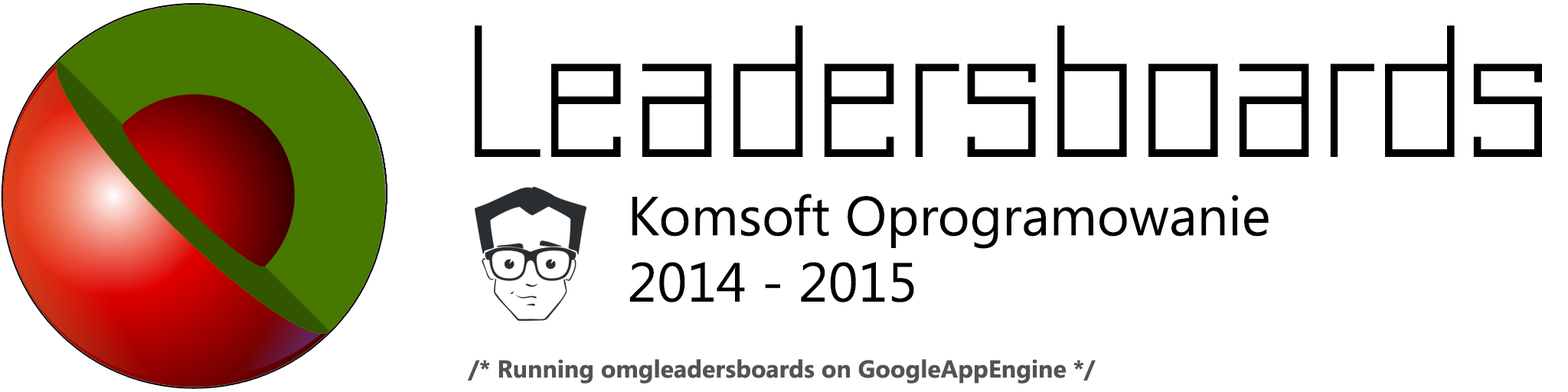
<style>
.page{position:relative;width:1568px;height:392px;background:#ffffff}
.page>*{position:absolute;margin:0}
.t1{font:192.9px "JustSquareLTStd-CyrThin";color:#000000}
.t2{font:55.1px "SegoeUI";color:#000000}
.t3{font:24.5px "SegoeUI-Bold";color:#545353}
</style>
<div class="page">
<p class="t1" style="left:475px;top:25px;width:1067px;height:132px">Leadersboards</p>
<p class="t2" style="left:629px;top:194px;width:640px;height:108px">Komsoft Oprogramowanie<br>2014 - 2015</p>
<p class="t3" style="left:468px;top:359px;width:628px;height:25px">/* Running omgleadersboards on GoogleAppEngine */</p>
</div>
